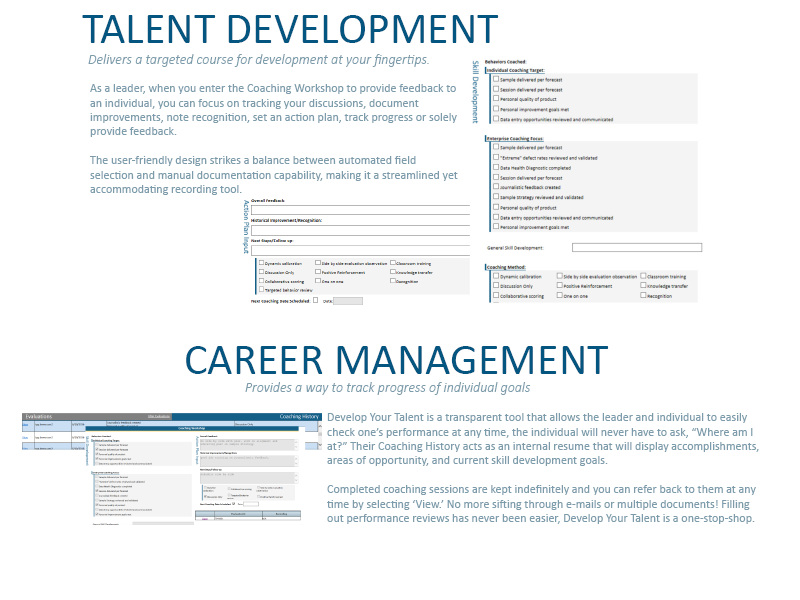
<style>
.page{position:relative;width:800px;height:600px;background:#ffffff}
.page>*{position:absolute;margin:0}
.t1{font:44px "Calibri";color:#04557f}
.t2{font:14px "Calibri-LightItalic";color:#7c9cab}
.t3{font:12px "Calibri";color:#7c9cab}
</style>
<div class="page">
<p class="t1" style="left:82px;top:15px;width:417px;height:28px">TALENT DEVELOPMENT</p>
<p class="t2" style="left:88px;top:54px;width:341px;height:13px">Delivers a targeted course for development at your fingertips.</p>
<p class="t3" style="left:90px;top:84px;width:368px;height:111px">As a leader, when you enter the Coaching Workshop to provide feedback to an individual, you can focus on tracking your discussions, document improvements, note recognition, set an action plan, track progress or solely provide feedback. <br><br>The user-friendly design strikes a balance between automated field selection and manual documentation capability, making it a streamlined yet accommodating recording tool.</p>
<p class="t1" style="left:186px;top:346px;width:423px;height:28px">CAREER MANAGEMENT</p>
<p class="t2" style="left:245px;top:382px;width:286px;height:13px">Provides a way to track progress of individual goals</p>
<p class="t3" style="left:327px;top:413px;width:432px;height:111px">Develop Your Talent is a transparent tool that allows the leader and individual to easily check one’s performance at any time, the individual will never have to ask, “Where am I at?” Their Coaching History acts as an internal resume that will display accomplishments, areas of opportunity, and current skill development goals.  <br><br>Completed coaching sessions are kept indefinitely and you can refer back to them at any time by selecting ‘View.’ No more sifting through e-mails or multiple documents! Filling out performance reviews has never been easier, Develop Your Talent is a one-stop-shop.</p>
</div>
